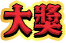
<style>
.page{position:relative;width:66px;height:43px}
.page>*{position:absolute;margin:0}
.t1{font:32px "AB-quadra";letter-spacing:0.05em;color:#ed2c35;scale:0.9 1}
</style>
<div class="page">
<p class="t1" style="left:4px;top:4px;width:58px;height:31px">大獎</p>
</div>
